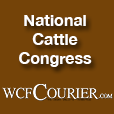
<style>
.page{position:relative;width:114px;height:114px;background:#744308}
.page>*{position:absolute;margin:0}
.t1{font:16px "HelveticaNeue-Bold";color:#ffffff}
</style>
<div class="page">
<p class="t1" style="left:19px;top:15px;width:73px;height:52px;text-align:center">National<br>Cattle<br>Congress</p>
</div>
